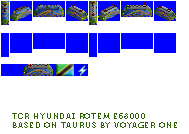
<style>
.page{position:relative;width:189px;height:134px;background:#ffffff}
.page>*{position:absolute;margin:0}
.t1{font:8px "Museo700-Regular";letter-spacing:0.1em;color:#306004;text-transform:uppercase}
</style>
<div class="page">
<p class="t1" style="left:12px;top:113px;width:165px;height:15px">tcr hyundai rotem e68000<br>based on taurus by voyager one</p>
</div>
